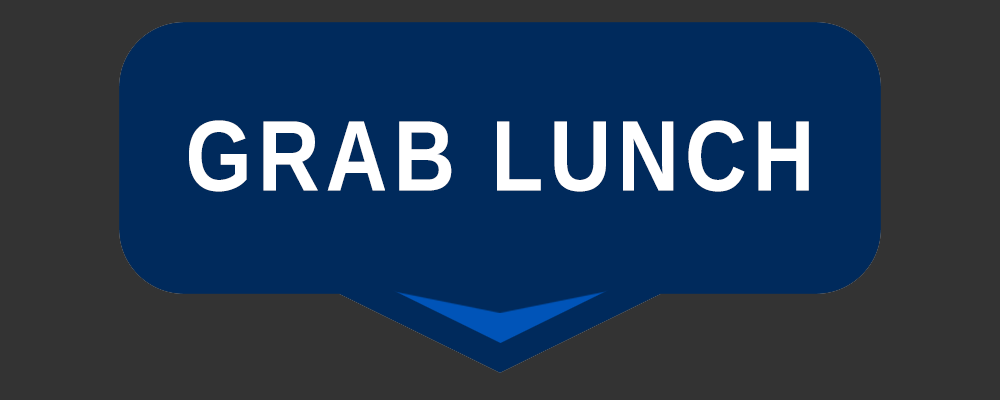
<style>
.page{position:relative;width:1000px;height:400px;background:#002a5c}
.page>*{position:absolute;margin:0}
.t1{font:100px "LiberationSans-Bold";letter-spacing:0.075em;color:#ffffff;scale:0.85 1}
</style>
<div class="page">
<p class="t1" style="left:189px;top:120px;width:620px;height:72px">GRAB LUNCH</p>
</div>
